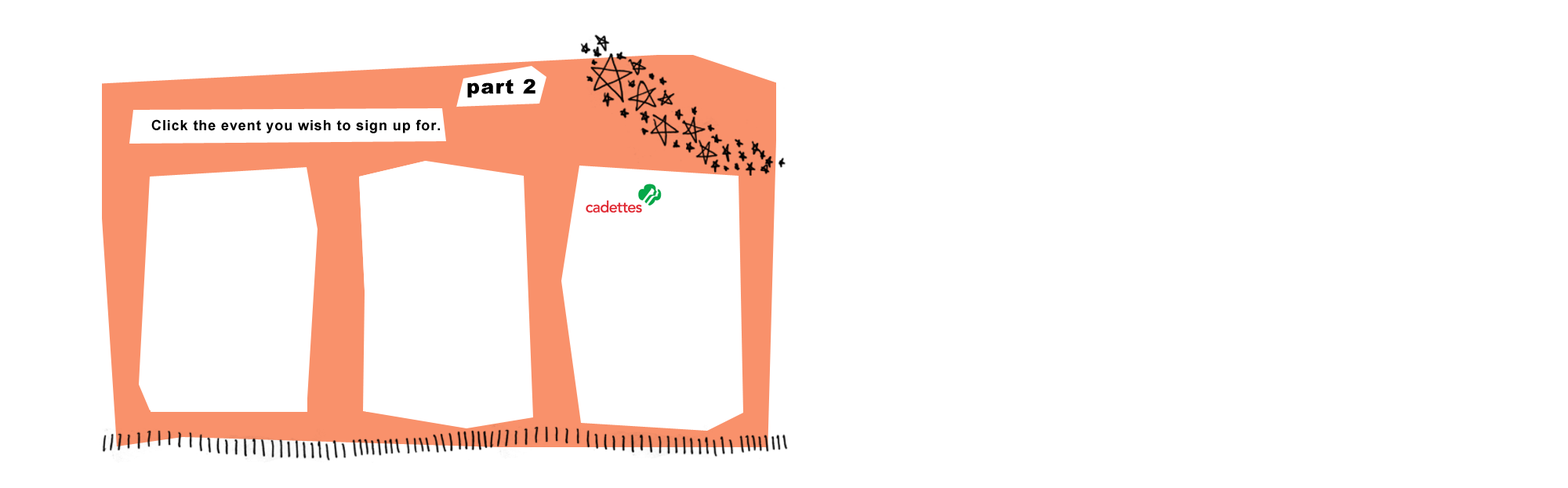
<style>
.page{position:relative;width:1568px;height:488px;background:#ffffff}
.page>*{position:absolute;margin:0}
.t1{font:20px "Arial-Black";letter-spacing:0.05em;color:#000000}
.t2{font:14.1px "Arial-BoldMT";letter-spacing:0.05em;color:#000000}
</style>
<div class="page">
<p class="t1" style="left:467px;top:78px;width:68px;height:20px">part 2</p>
<p class="t2" style="left:151px;top:119px;width:289px;height:14px">Click the event you wish to sign up for.</p>
</div>
